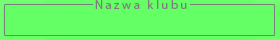
<style>
.page{position:relative;width:280px;height:40px;background:#64ff64}
.page>*{position:absolute;margin:0}
.t1{font:12.5px "MyriadPro-Regular";letter-spacing:0.2em;color:#7c7c7c}
</style>
<div class="page">
<p class="t1" style="left:95px;top:0px;width:92px;height:9px">Nazwa klubu</p>
</div>
